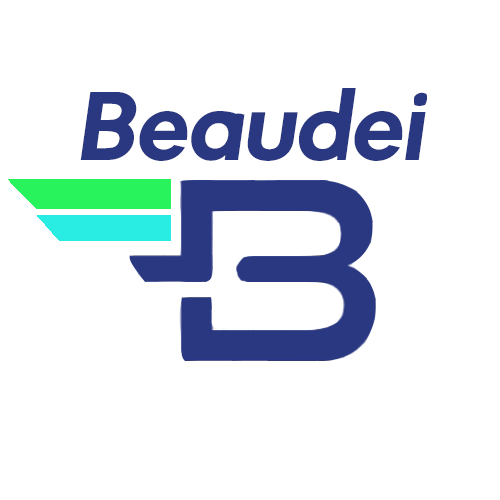
<style>
.page{position:relative;width:500px;height:500px;background:#ffffff}
.page>*{position:absolute;margin:0}
.t1{font:83.3px "RabbidHighwaySignIIObl";color:#2a3881}
</style>
<div class="page">
<p class="t1" style="left:80px;top:88px;width:347px;height:73px">Beaudei</p>
</div>
